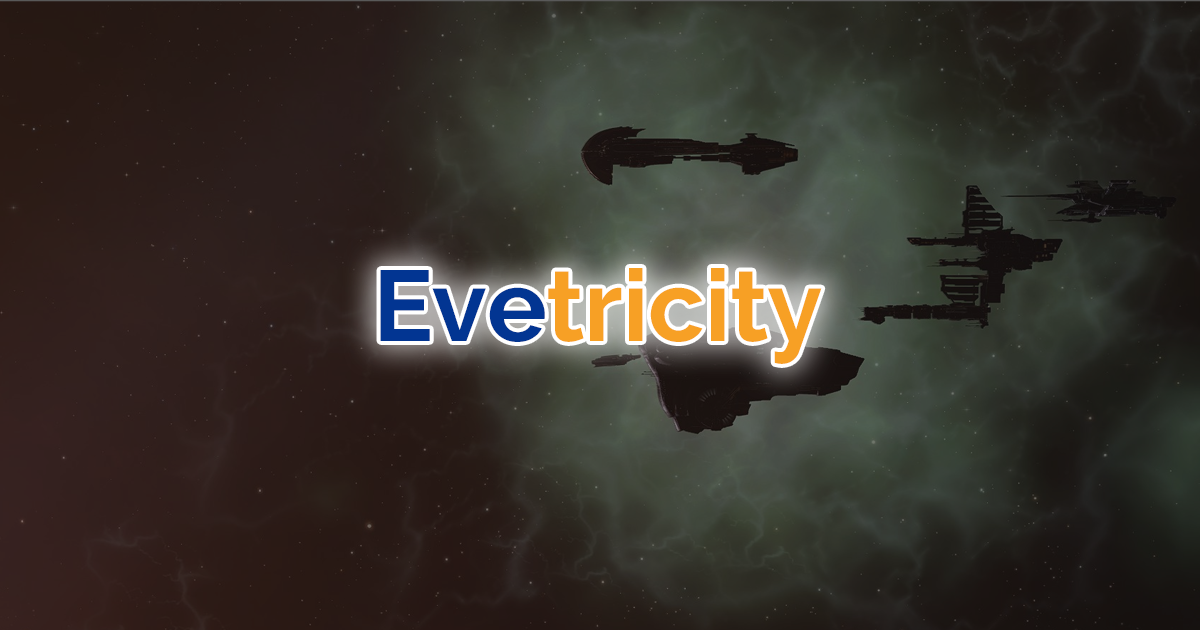
<style>
.page{position:relative;width:1200px;height:630px}
.page>*{position:absolute;margin:0}
.t1{font:100px "Raleway-Bold";color:#f7a025}
.t2{font:100px "Raleway-Bold";color:#023592}
</style>
<div class="page">
<p class="t1" style="left:380px;top:268px;width:442px;height:96px"><span class="t2">Eve</span>tricity</p>
</div>
